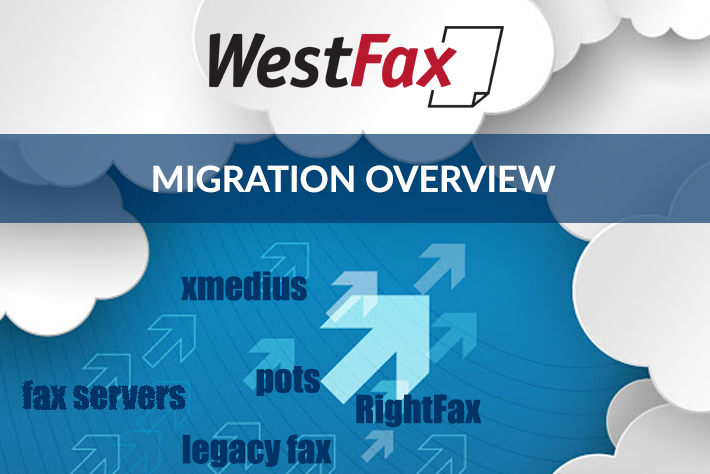
<style>
.page{position:relative;width:710px;height:474px}
.page>*{position:absolute;margin:0}
.t1{font:36px "Lato-Bold";color:#ffffff}
.t2{font:36px "Impact";color:#003366}
</style>
<div class="page">
<p class="t1" style="left:153px;top:165px;width:403px;height:28px">MIGRATION OVERVIEW</p>
<p class="t2" style="left:181px;top:271px;width:126px;height:30px">xmedius</p>
<p class="t2" style="left:256px;top:366px;width:64px;height:30px">pots</p>
<p class="t2" style="left:22px;top:380px;width:163px;height:30px">fax servers</p>
<p class="t2" style="left:356px;top:394px;width:126px;height:34px">RightFax</p>
<p class="t2" style="left:182px;top:434px;width:150px;height:34px">legacy fax</p>
</div>
